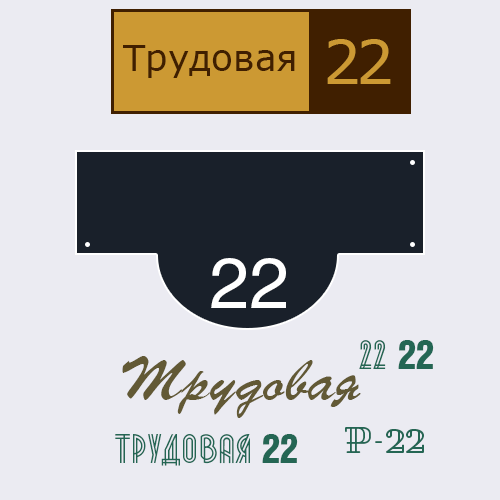
<style>
.page{position:relative;width:500px;height:500px;background:#ebebf2}
.page>*{position:absolute;margin:0}
.t1{font:60px "Verdana";letter-spacing:-0.075em;color:#cc9933}
.t2{font:36px "Verdana";color:#401f00}
.t3{font:72px "HelveticaCyr-Upright";color:#ffffff}
.t4{font:36px "Metropolis1920";color:#246654}
.t5{font:36px "HelveticaInseratLT-Roman";color:#246654}
.t6{font:60px "ParsekCyrillic";color:#625935}
.t7{font:36px "Pirou-Regular";color:#246654}
</style>
<div class="page">
<p class="t1" style="left:327px;top:39px;width:64px;height:45px">22</p>
<p class="t2" style="left:123px;top:45px;width:172px;height:33px">Трудовая</p>
<p class="t3" style="left:211px;top:258px;width:75px;height:50px">22</p>
<p class="t4" style="left:359px;top:340px;width:75px;height:29px">22 <span class="t5">22</span></p>
<p class="t6" style="left:122px;top:356px;width:239px;height:62px">Трудовая</p>
<p class="t4" style="left:115px;top:434px;width:135px;height:32px">ТРУДОВАЯ</p>
<p class="t5" style="left:262px;top:434px;width:36px;height:29px">22</p>
<p class="t7" style="left:345px;top:427px;width:79px;height:26px">P-22</p>
</div>
